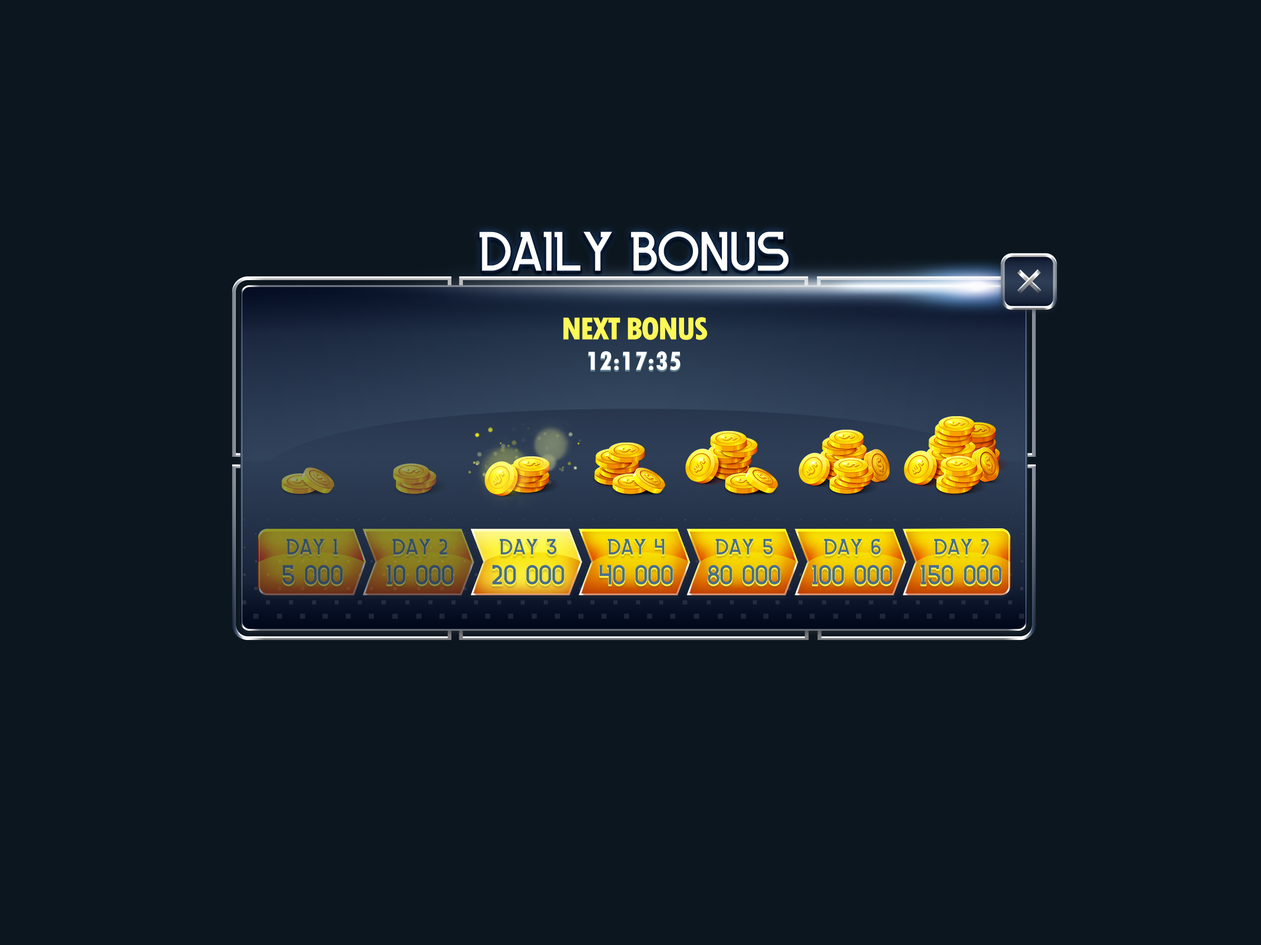
<style>
.page{position:relative;width:1261px;height:945px;background:#0c161f}
.page>*{position:absolute;margin:0}
.t1{font:55.4px "INKFERNO";letter-spacing:-0.025em;color:#ffffff;text-transform:uppercase}
.t2{font:33.2px "TwCenMT-CondensedExtraBold";letter-spacing:-0.05em;color:#fef859;text-transform:uppercase}
.t3{font:27.7px "TwCenMT-CondensedExtraBold";color:#ffffff}
.t4{font:22.2px "INKFERNO";color:#334e67;text-transform:uppercase}
.t5{font:22.2px "INKFERNO";color:#476f8b;text-transform:uppercase}
.t6{font:27.7px "INKFERNO";color:#304a63;text-transform:uppercase}
.t7{font:27.7px "INKFERNO";color:#476f8b;text-transform:uppercase}
</style>
<div class="page">
<p class="t1" style="left:480px;top:231px;width:309px;height:40px">Daily Bonus</p>
<p class="t2" style="left:563px;top:317px;width:144px;height:23px">next bonus</p>
<p class="t3" style="left:589px;top:351px;width:91px;height:20px">12:17:35</p>
<p class="t4" style="left:286px;top:539px;width:52px;height:16px">day 1</p>
<p class="t4" style="left:392px;top:539px;width:55px;height:16px">day 2</p>
<p class="t5" style="left:500px;top:539px;width:57px;height:16px">day 3</p>
<p class="t5" style="left:608px;top:539px;width:56px;height:16px">day 4</p>
<p class="t5" style="left:716px;top:539px;width:57px;height:16px">day 5</p>
<p class="t5" style="left:824px;top:539px;width:57px;height:16px">day 6</p>
<p class="t5" style="left:934px;top:539px;width:55px;height:16px">day 7</p>
<p class="t6" style="left:283px;top:565px;width:60px;height:20px">5 000</p>
<p class="t6" style="left:387px;top:565px;width:67px;height:20px">10 000</p>
<p class="t7" style="left:492px;top:565px;width:72px;height:20px">20 000</p>
<p class="t7" style="left:600px;top:565px;width:73px;height:20px">40 000</p>
<p class="t7" style="left:708px;top:565px;width:73px;height:20px">80 000</p>
<p class="t7" style="left:813px;top:565px;width:79px;height:20px">100 000</p>
<p class="t7" style="left:921px;top:565px;width:81px;height:20px">150 000</p>
</div>
